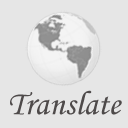
<style>
.page{position:relative;width:128px;height:128px;background:#e6e6e6}
.page>*{position:absolute;margin:0}
.t1{font:34px "MonotypeCorsiva";color:#4e4a4a}
</style>
<div class="page">
<p class="t1" style="left:10px;top:90px;width:112px;height:25px">Translate</p>
</div>
